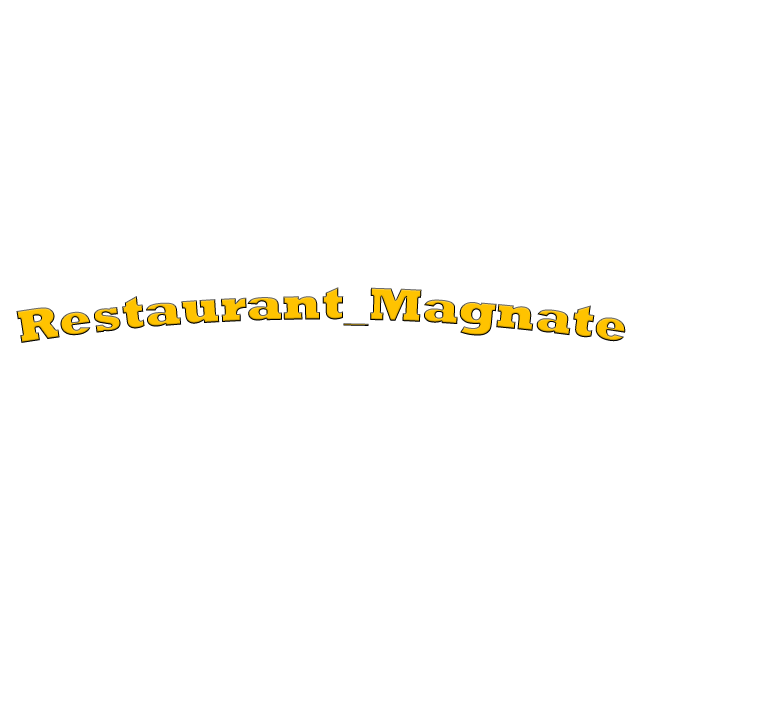
<style>
.page{position:relative;width:773px;height:724px;background:#ffffff}
.page>*{position:absolute;margin:0}
.t1{font:48px "Rockwell-ExtraBold";color:#ffc300}
</style>
<div class="page">
<p class="t1" style="left:16px;top:287px;width:610px;height:56px">Restaurant_Magnate</p>
</div>
